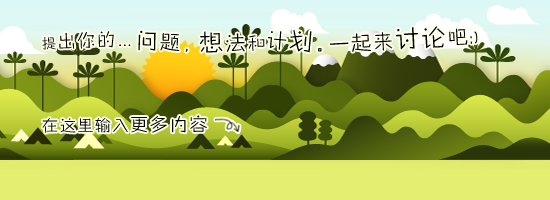
<style>
.page{position:relative;width:550px;height:200px}
.page>*{position:absolute;margin:0}
.t1{font:20px "FZZHYJW--GB1-0";letter-spacing:0.1em;color:#000000}
.t2{font:22px "FZZHYJW--GB1-0";letter-spacing:0.1em;color:#000000}
.t3{font:24px "FZZHYJW--GB1-0";letter-spacing:0.1em;color:#000000}
.t4{font:18px "FZZHYJW--GB1-0";letter-spacing:0.1em;color:#000000}
.t5{font:14px "FZZHYJW--GB1-0";letter-spacing:0.1em;color:#000000}
.t6{font:14px "FZQTJW--GB1-0";letter-spacing:0.1em;color:#000000}
.t7{font:16px "FZZHYJW--GB1-0";letter-spacing:0.1em;color:#000000}
</style>
<div class="page">
<p class="t1" style="left:138px;top:30px;width:50px;height:22px;rotate:1deg"><span class="t2">问</span>题，</p>
<p class="t1" style="left:268px;top:30px;width:54px;height:23px;rotate:5deg">计<span class="t3">划</span>。</p>
<p class="t1" style="left:330px;top:26px;width:148px;height:26px;rotate:-3deg">一起来<span class="t3">讨论</span>吧:)</p>
<p class="t4" style="left:42px;top:31px;width:72px;height:19px;rotate:-2deg"><span class="t5">提</span>出你的</p>
<p class="t3" style="left:199px;top:31px;width:66px;height:22px;rotate:-2deg">想<span class="t1">法</span><span class="t4">和</span></p>
<p class="t6" style="left:119px;top:44px;width:12px;height:2px">…</p>
<p class="t7" style="left:42px;top:115px;width:165px;height:18px">在这里输入<span class="t4">更多内容</span></p>
</div>
